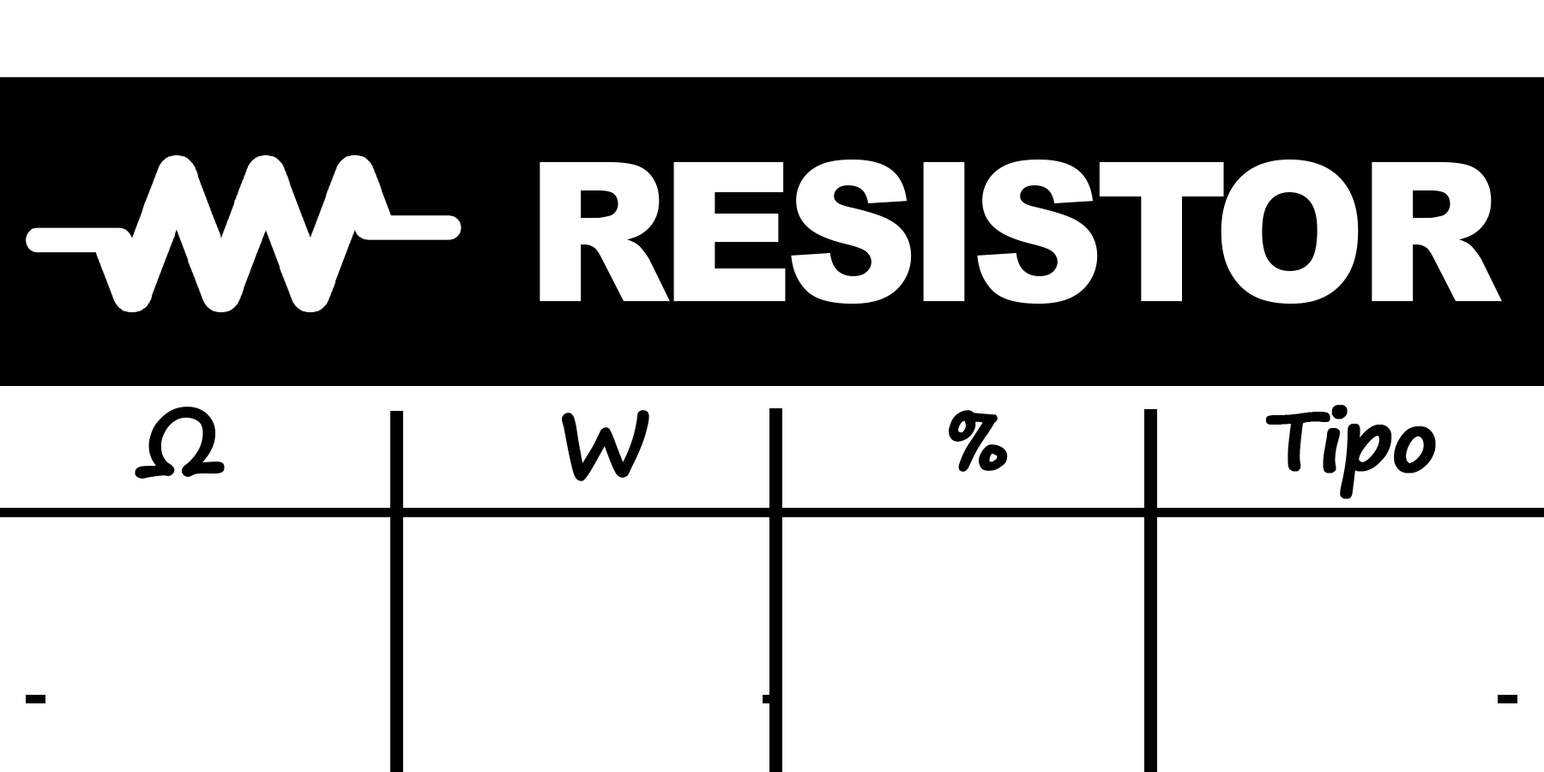
<style>
.page{position:relative;width:1544px;height:772px;background:#ffffff}
.page>*{position:absolute;margin:0}
.t1{font:193.9px "Arial-Black";letter-spacing:-0.05em;color:#ffffff;scale:0.95 1}
.t2{font:90.8px "SegoePrint-Bold";letter-spacing:-0.15em;color:#000000;font-weight:bold}
.t3{font:81.7px "SegoePrint-Bold";letter-spacing:-0.05em;color:#000000;font-weight:bold}
</style>
<div class="page">
<p class="t1" style="left:540px;top:160px;width:962px;height:144px">RESISTOR</p>
<p class="t2" style="left:135px;top:407px;width:90px;height:72px">Ω</p>
<p class="t2" style="left:561px;top:410px;width:88px;height:71px">W</p>
<p class="t2" style="left:949px;top:410px;width:59px;height:62px">%</p>
<p class="t3" style="left:1265px;top:405px;width:171px;height:94px">Tipo</p>
</div>
